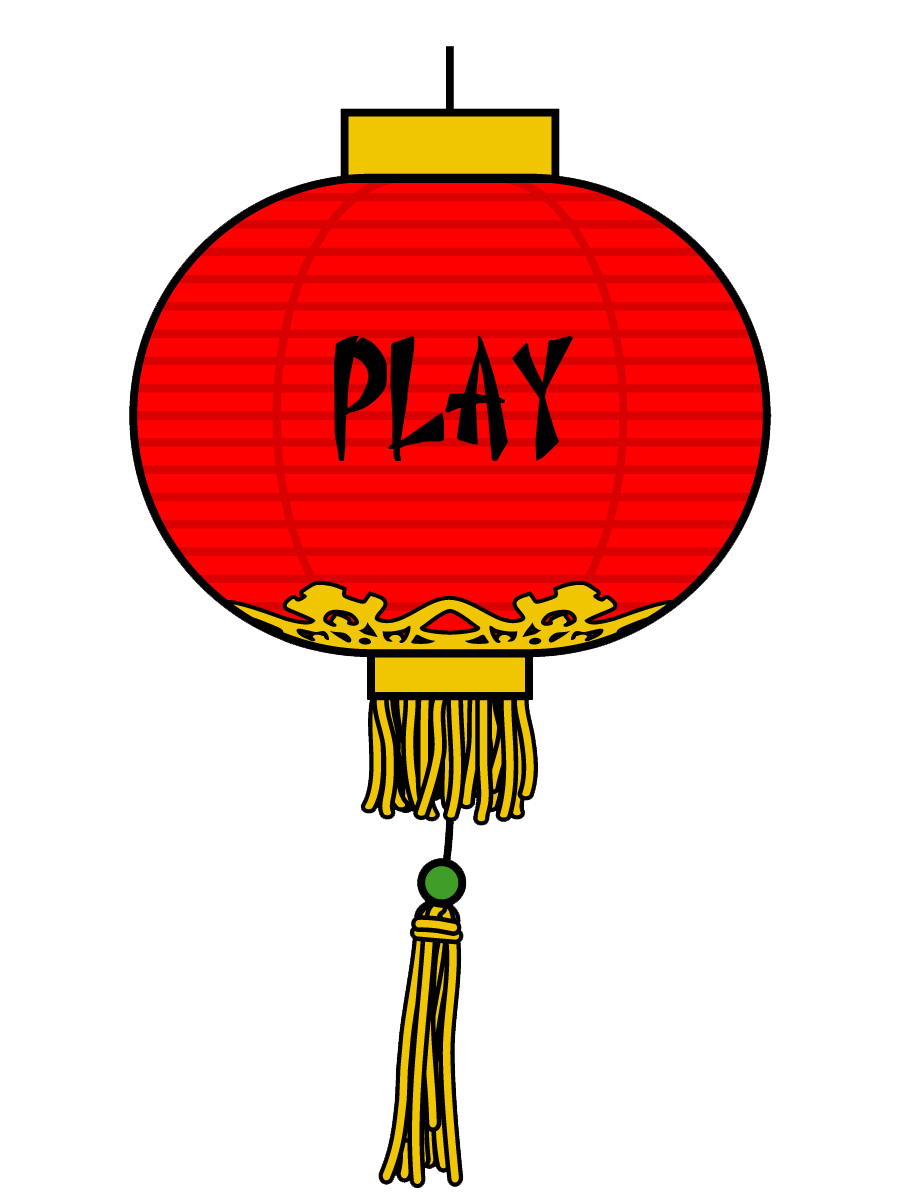
<style>
.page{position:relative;width:900px;height:1200px;background:#ffffff}
.page>*{position:absolute;margin:0}
.t1{font:125px "ChineseTakeaway";color:#000000}
</style>
<div class="page">
<p class="t1" style="left:333px;top:336px;width:240px;height:125px">play</p>
</div>
